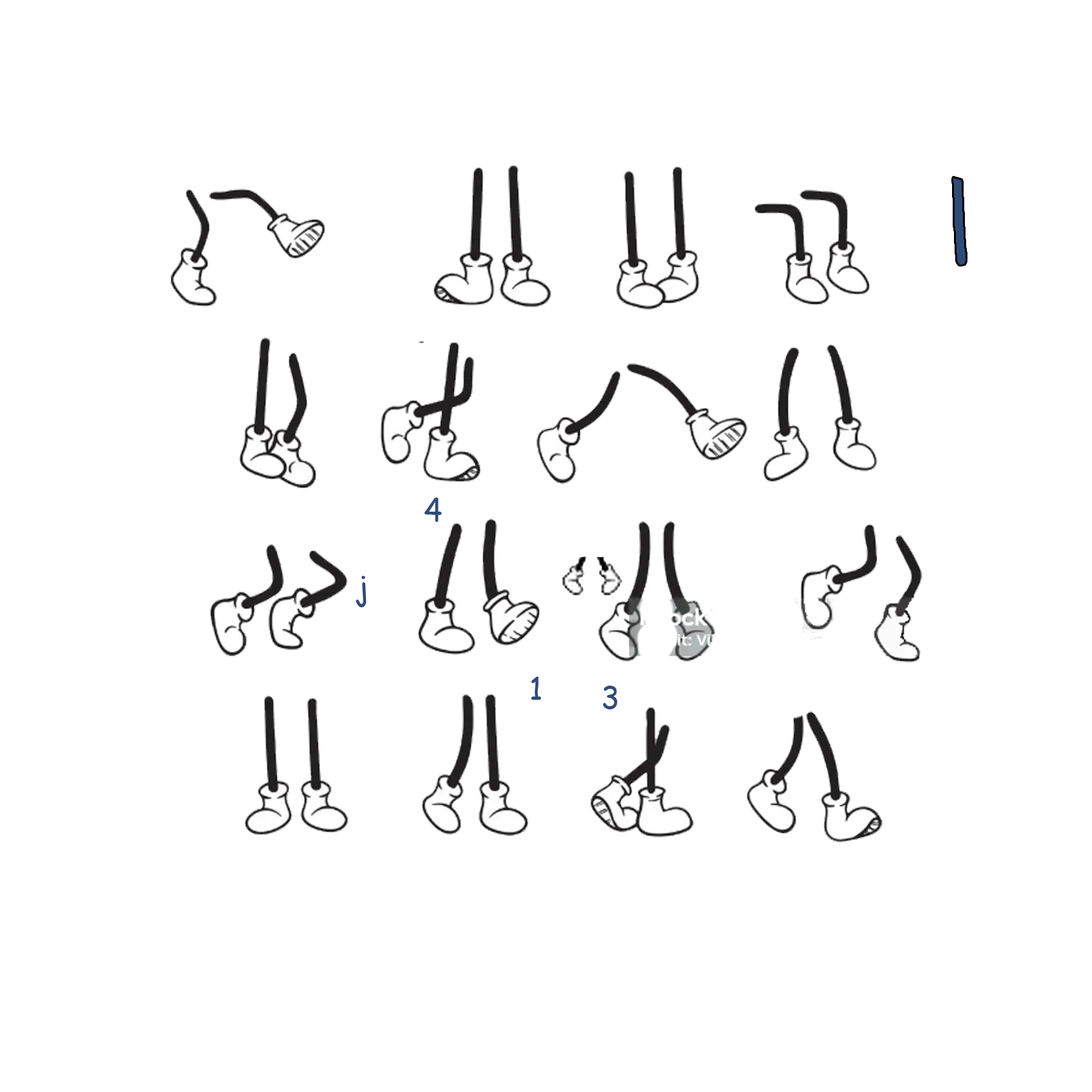
<style>
.page{position:relative;width:1092px;height:1092px;background:#ffffff}
.page>*{position:absolute;margin:0}
.t1{font:30.8px "ComicSansMS";letter-spacing:-0.01em;color:#304b76}
</style>
<div class="page">
<p class="t1" style="left:424px;top:498px;width:18px;height:24px">4</p>
<p class="t1" style="left:356px;top:576px;width:11px;height:31px">j</p>
<p class="t1" style="left:531px;top:677px;width:10px;height:23px">1</p>
<p class="t1" style="left:603px;top:686px;width:15px;height:23px">3</p>
</div>
